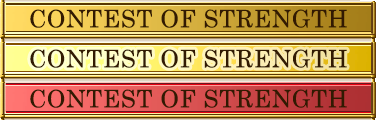
<style>
.page{position:relative;width:376px;height:120px}
.page>*{position:absolute;margin:0}
.t1{font:24px "CenturySchoolbook";letter-spacing:0.025em;color:#321a02}
</style>
<div class="page">
<p class="t1" style="left:30px;top:9px;width:317px;height:19px">CONTEST OF STRENGTH</p>
<p class="t1" style="left:30px;top:49px;width:317px;height:19px">CONTEST OF STRENGTH</p>
<p class="t1" style="left:30px;top:89px;width:317px;height:19px">CONTEST OF STRENGTH</p>
</div>
